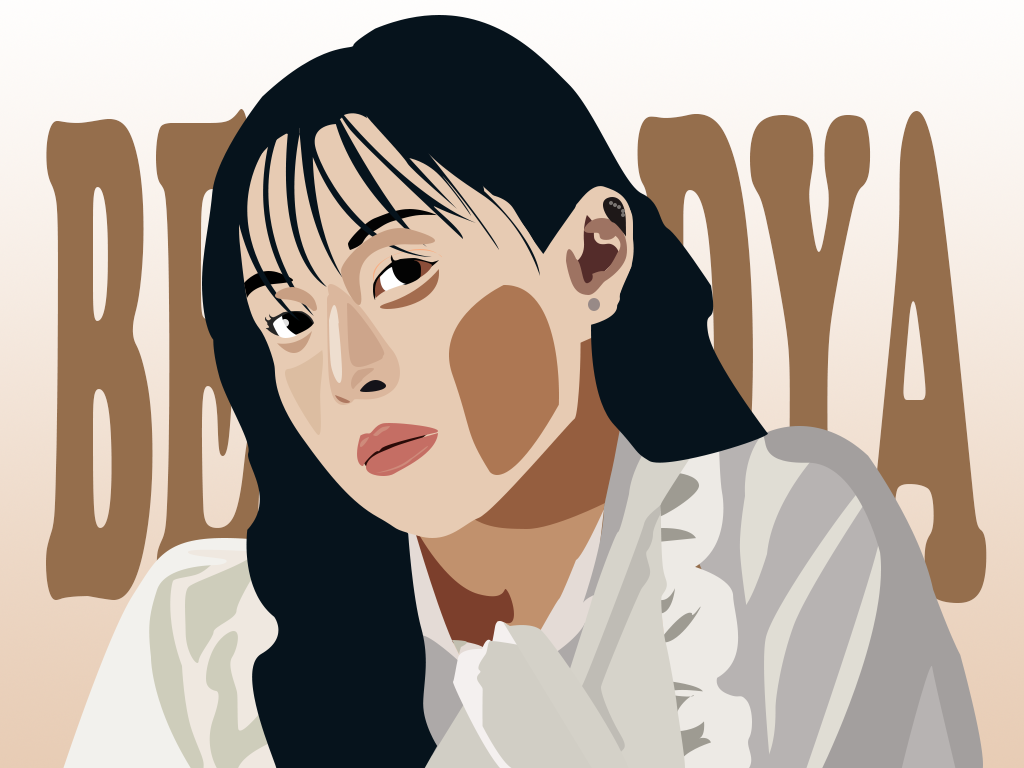
<style>
.page{position:relative;width:1024px;height:768px}
.page>*{position:absolute;margin:0}
.t1{font:710.1px "CooperBlack";scale:0.22 1}
</style>
<div class="page">
<p class="t1" style="left:46px;top:109px;width:941px;height:501px">BERNADYA</p>
</div>
